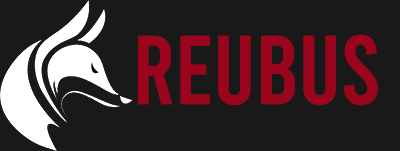
<style>
.page{position:relative;width:400px;height:151px;background:#191919}
.page>*{position:absolute;margin:0}
.t1{font:97.4px "Bebas-Regular";color:#9b041d}
</style>
<div class="page">
<p class="t1" style="left:138px;top:34px;width:240px;height:72px">REUBUS</p>
</div>
